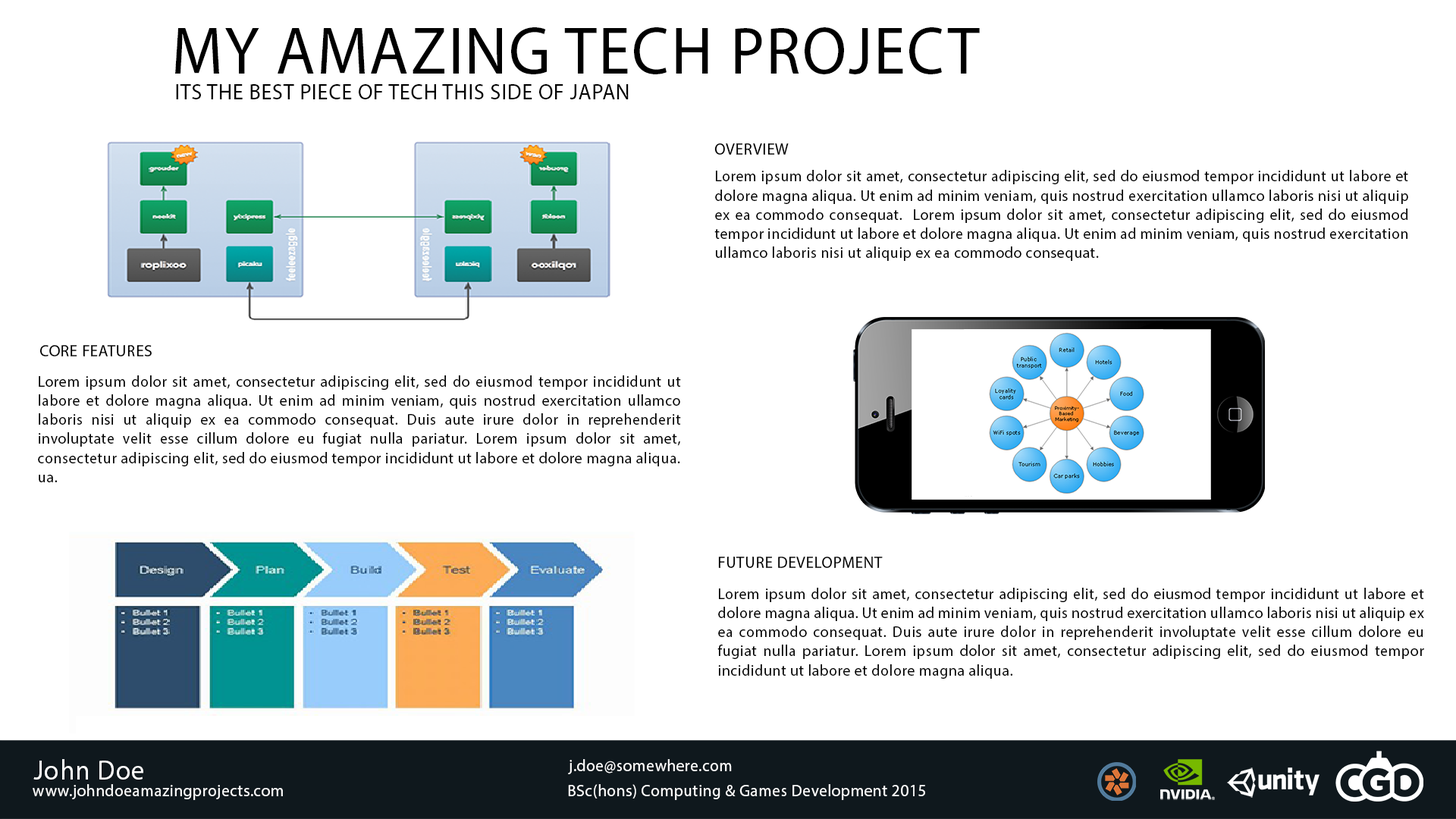
<style>
.page{position:relative;width:1456px;height:819px;background:#ffffff}
.page>*{position:absolute;margin:0}
.t1{font:67.2px "MyriadPro-Regular";letter-spacing:0.03em;color:#000000;scale:0.95 1}
.t2{font:22.4px "MyriadPro-Regular";letter-spacing:0.03em;color:#000000;scale:0.95 1}
.t3{font:16.8px "MyriadPro-Regular";letter-spacing:0.03em;color:#000000;scale:0.95 1}
.t4{font:15.9px "MyriadPro-Regular";letter-spacing:0.03em;color:#000000;scale:0.95 1}
.t5{font:28px "MyriadPro-Regular";letter-spacing:0.03em;color:#ffffff;scale:0.95 1}
.t6{font:16.8px "MyriadPro-Regular";letter-spacing:0.03em;color:#ffffff;scale:0.95 1}
</style>
<div class="page">
<p class="t1" style="left:175px;top:27px;width:805px;height:47px">MY AMAZING TECH PROJECT</p>
<p class="t2" style="left:176px;top:84px;width:453px;height:15px">ITS THE BEST PIECE OF TECH THIS SIDE OF JAPAN</p>
<p class="t3" style="left:714px;top:143px;width:75px;height:12px">OVERVIEW</p>
<p class="t4" style="left:714px;top:170px;width:694px;height:91px;text-align:justify">Lorem ipsum dolor sit amet, consectetur adipiscing elit, sed do eiusmod tempor incididunt ut labore et dolore magna aliqua. Ut enim ad minim veniam, quis nostrud exercitation ullamco laboris nisi ut aliquip ex ea commodo consequat.  Lorem ipsum dolor sit amet, consectetur adipiscing elit, sed do eiusmod tempor incididunt ut labore et dolore magna aliqua. Ut enim ad minim veniam, quis nostrud exercitation ullamco laboris nisi ut aliquip ex ea commodo consequat.</p>
<p class="t3" style="left:39px;top:345px;width:113px;height:11px">CORE FEATURES</p>
<p class="t4" style="left:38px;top:375px;width:643px;height:107px;text-align:justify">Lorem ipsum dolor sit amet, consectetur adipiscing elit, sed do eiusmod tempor incididunt ut labore et dolore magna aliqua. Ut enim ad minim veniam, quis nostrud exercitation ullamco laboris nisi ut aliquip ex ea commodo consequat. Duis aute irure dolor in reprehenderit involuptate velit esse cillum dolore eu fugiat nulla pariatur. Lorem ipsum dolor sit amet, consectetur adipiscing elit, sed do eiusmod tempor incididunt ut labore et dolore magna aliqua. <br>ua.</p>
<p class="t3" style="left:718px;top:557px;width:165px;height:11px">FUTURE DEVELOPMENT</p>
<p class="t4" style="left:717px;top:588px;width:707px;height:91px;text-align:justify">Lorem ipsum dolor sit amet, consectetur adipiscing elit, sed do eiusmod tempor incididunt ut labore et dolore magna aliqua. Ut enim ad minim veniam, quis nostrud exercitation ullamco laboris nisi ut aliquip ex ea commodo consequat. Duis aute irure dolor in reprehenderit involuptate velit esse cillum dolore eu fugiat nulla pariatur. Lorem ipsum dolor sit amet, consectetur adipiscing elit, sed do eiusmod tempor incididunt ut labore et dolore magna aliqua.</p>
<p class="t5" style="left:33px;top:759px;width:110px;height:21px">John Doe</p>
<p class="t6" style="left:568px;top:759px;width:164px;height:15px">j.doe@somewhere.com</p>
<p class="t6" style="left:33px;top:784px;width:250px;height:16px">www.johndoeamazingprojects.com</p>
<p class="t6" style="left:568px;top:784px;width:357px;height:16px">BSc(hons) Computing &amp; Games Development 2015</p>
</div>
